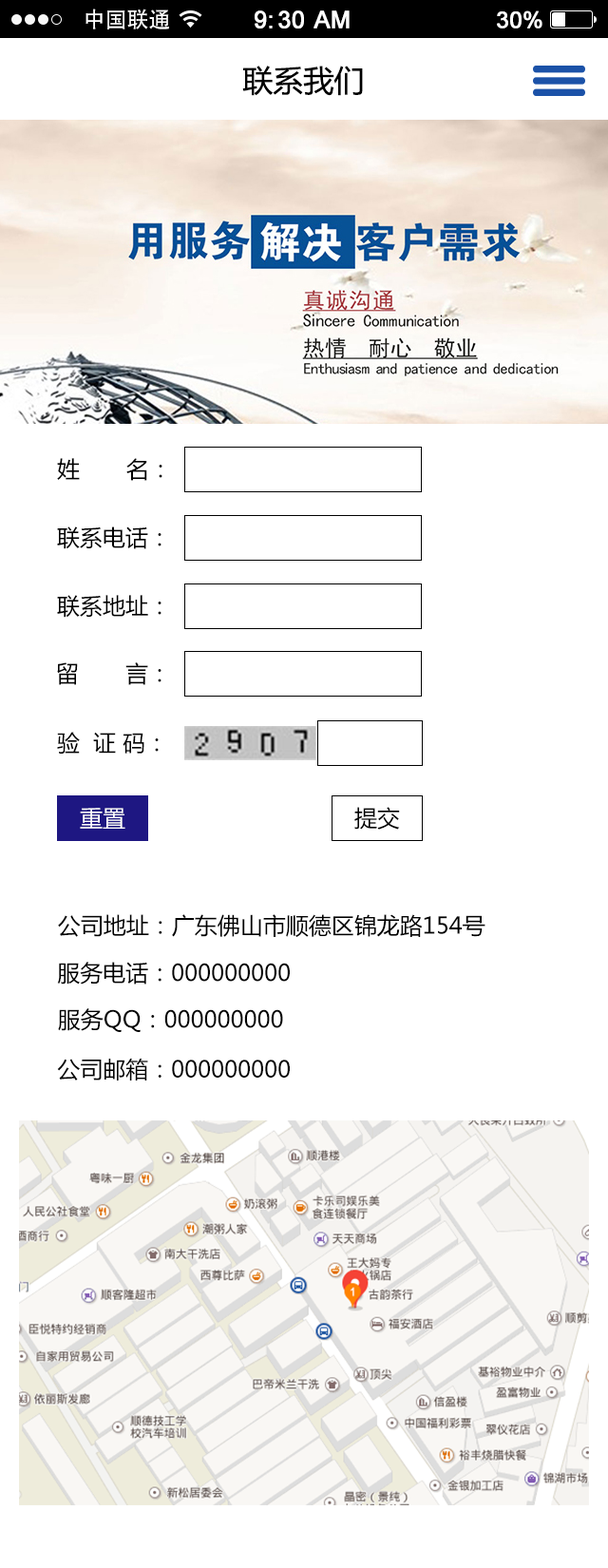
<style>
.page{position:relative;width:608px;height:1568px;background:#ffffff}
.page>*{position:absolute;margin:0}
.t1{font:21.9px "AdobeHeitiStd-Regular";color:#ffffff}
.t2{font:23.8px "ArialMT";color:#ffffff;font-weight:bold}
.t3{font:22.8px "ArialMT";color:#ffffff;font-weight:bold}
.t4{font:30.4px "MicrosoftYaHei";color:#000000}
.t5{font:22.8px "MicrosoftYaHei";color:#000000}
.t6{font:22.8px "MicrosoftYaHei";color:#ffffff}
</style>
<div class="page">
<p class="t1" style="left:86px;top:9px;width:83px;height:20px">中国联通</p>
<p class="t1" style="left:86px;top:9px;width:83px;height:20px">中国联通</p>
<p class="t2" style="left:255px;top:10px;width:95px;height:19px">9:30 AM</p>
<p class="t2" style="left:255px;top:10px;width:95px;height:19px">9:30 AM</p>
<p class="t3" style="left:497px;top:10px;width:46px;height:19px">30%</p>
<p class="t3" style="left:497px;top:10px;width:46px;height:19px">30%</p>
<p class="t4" style="left:242px;top:66px;width:121px;height:30px">联系我们</p>
<p class="t5" style="left:57px;top:458px;width:106px;height:23px">姓       名：</p>
<p class="t5" style="left:57px;top:526px;width:105px;height:23px">联系电话：</p>
<p class="t5" style="left:57px;top:595px;width:105px;height:23px">联系地址：</p>
<p class="t5" style="left:57px;top:662px;width:105px;height:23px">留       言：</p>
<p class="t5" style="left:57px;top:732px;width:102px;height:22px">验  证 码：</p>
<p class="t6" style="left:80px;top:808px;width:45px;height:21px">重置</p>
<p class="t5" style="left:354px;top:807px;width:46px;height:23px">提交</p>
<p class="t5" style="left:58px;top:914px;width:428px;height:23px">公司地址：广东佛山市顺德区锦龙路154号</p>
<p class="t5" style="left:57px;top:962px;width:233px;height:23px">服务电话：000000000</p>
<p class="t5" style="left:58px;top:1008px;width:225px;height:24px">服务QQ：000000000</p>
<p class="t5" style="left:57px;top:1059px;width:233px;height:21px">公司邮箱：000000000</p>
</div>
